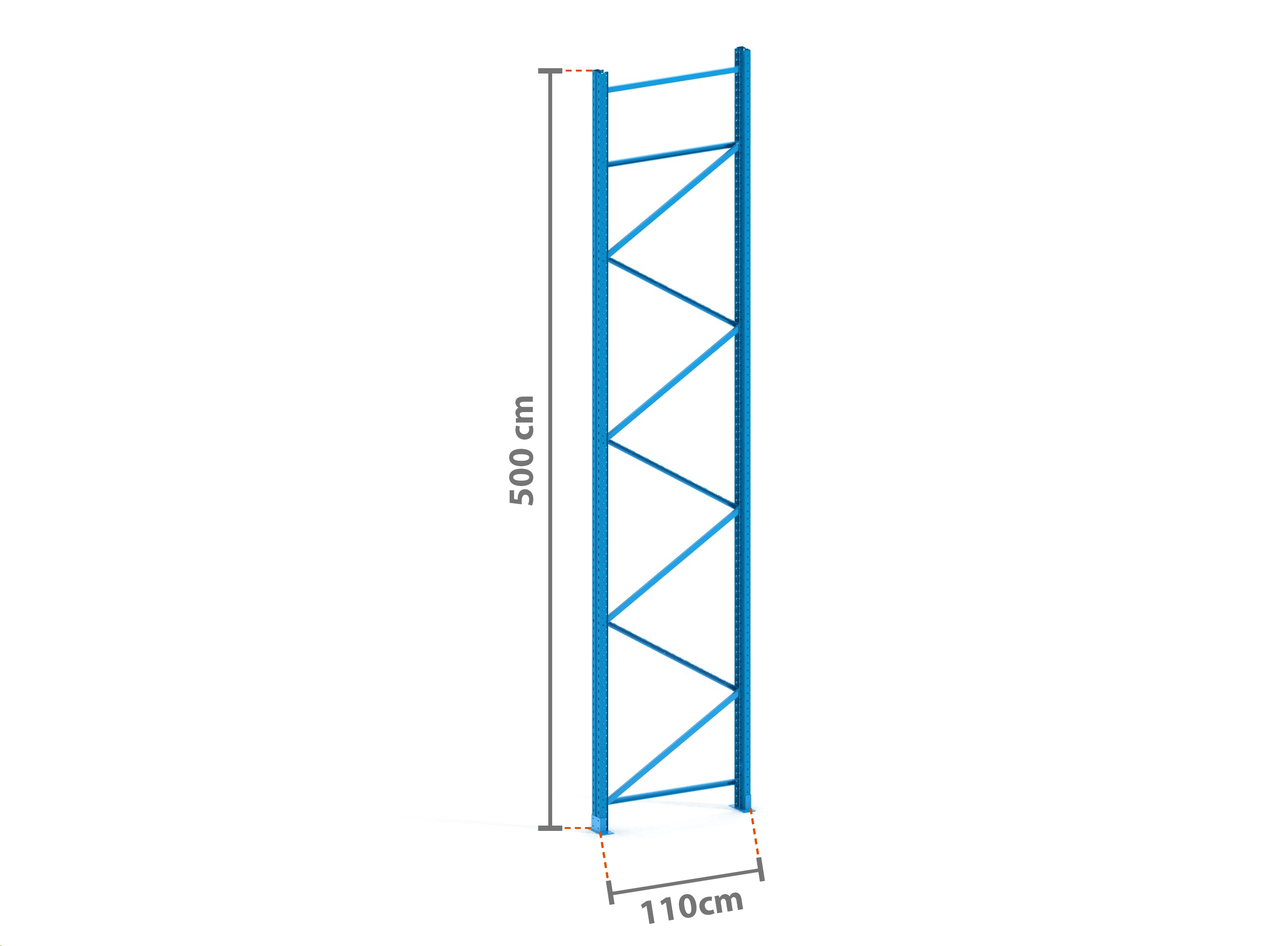
<style>
.page{position:relative;width:1261px;height:946px;background:#ffffff}
.page>*{position:absolute;margin:0}
.t1{font:35.5px "MyriadPro-Bold";color:#757575}
</style>
<div class="page">
<p class="t1" style="left:509px;top:396px;width:24px;height:110px;rotate:-90deg">500 cm</p>
<p class="t1" style="left:641px;top:892px;width:102px;height:32px;rotate:-9deg">110cm</p>
</div>
